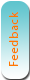
<style>
.page{position:relative;width:30px;height:80px}
.page>*{position:absolute;margin:0}
.t1{font:12px "MyriadPro-Regular";letter-spacing:0.075em;color:#ff7800}
</style>
<div class="page">
<p class="t1" style="left:9px;top:12px;width:9px;height:54px;rotate:-90deg">Feedback</p>
</div>
